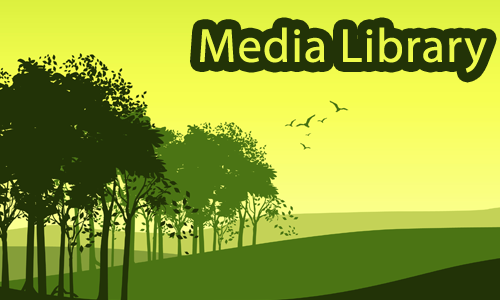
<style>
.page{position:relative;width:500px;height:300px;background:#223307}
.page>*{position:absolute;margin:0}
.t1{font:48px "MyriadPro-Regular";color:#ecf94a;font-weight:bold}
</style>
<div class="page">
<p class="t1" style="left:200px;top:27px;width:287px;height:46px">Media Library</p>
</div>
